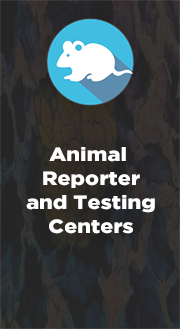
<style>
.page{position:relative;width:180px;height:329px}
.page>*{position:absolute;margin:0}
.t1{font:19.2px/24px "GothamBlack";color:#ffffff;scale:1.12 1}
</style>
<div class="page">
<p class="t1" style="left:26px;top:147px;width:129px;height:87px;text-align:center">Animal <br>Reporter<br>and Testing<br>Centers</p>
</div>
